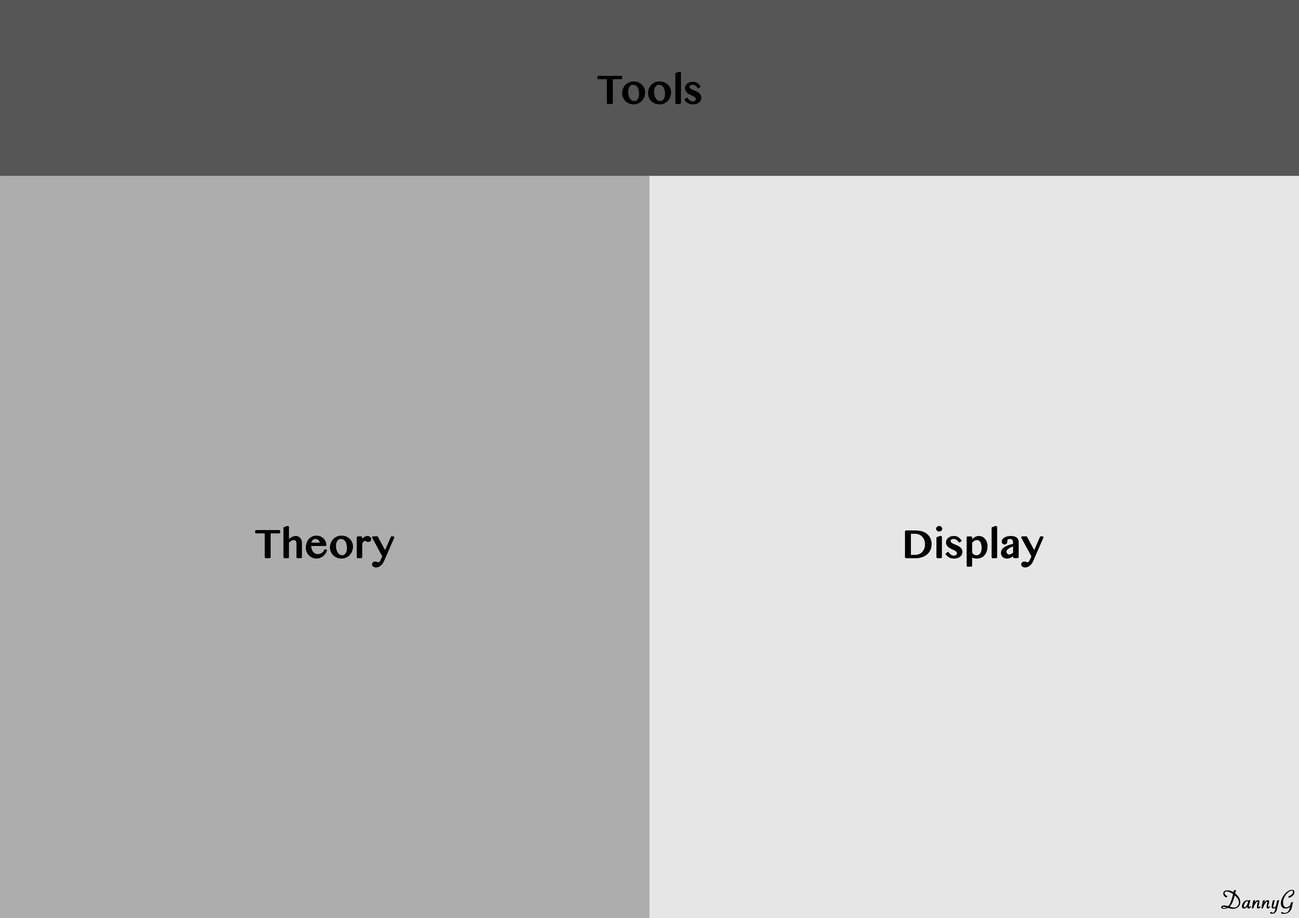
<style>
.page{position:relative;width:1299px;height:918px;background:#adadad}
.page>*{position:absolute;margin:0}
.t1{font:55.5px "SinhalaMN";color:#000000;font-weight:bold}
.t2{font:27.8px "SavoyeLetPlain";color:#000000;font-weight:bold}
</style>
<div class="page">
<p class="t1" style="left:597px;top:71px;width:105px;height:34px">Tools</p>
<p class="t1" style="left:255px;top:526px;width:140px;height:42px">Theory</p>
<p class="t1" style="left:904px;top:526px;width:140px;height:42px">Display</p>
<p class="t2" style="left:1221px;top:890px;width:73px;height:24px">DannyG</p>
</div>
